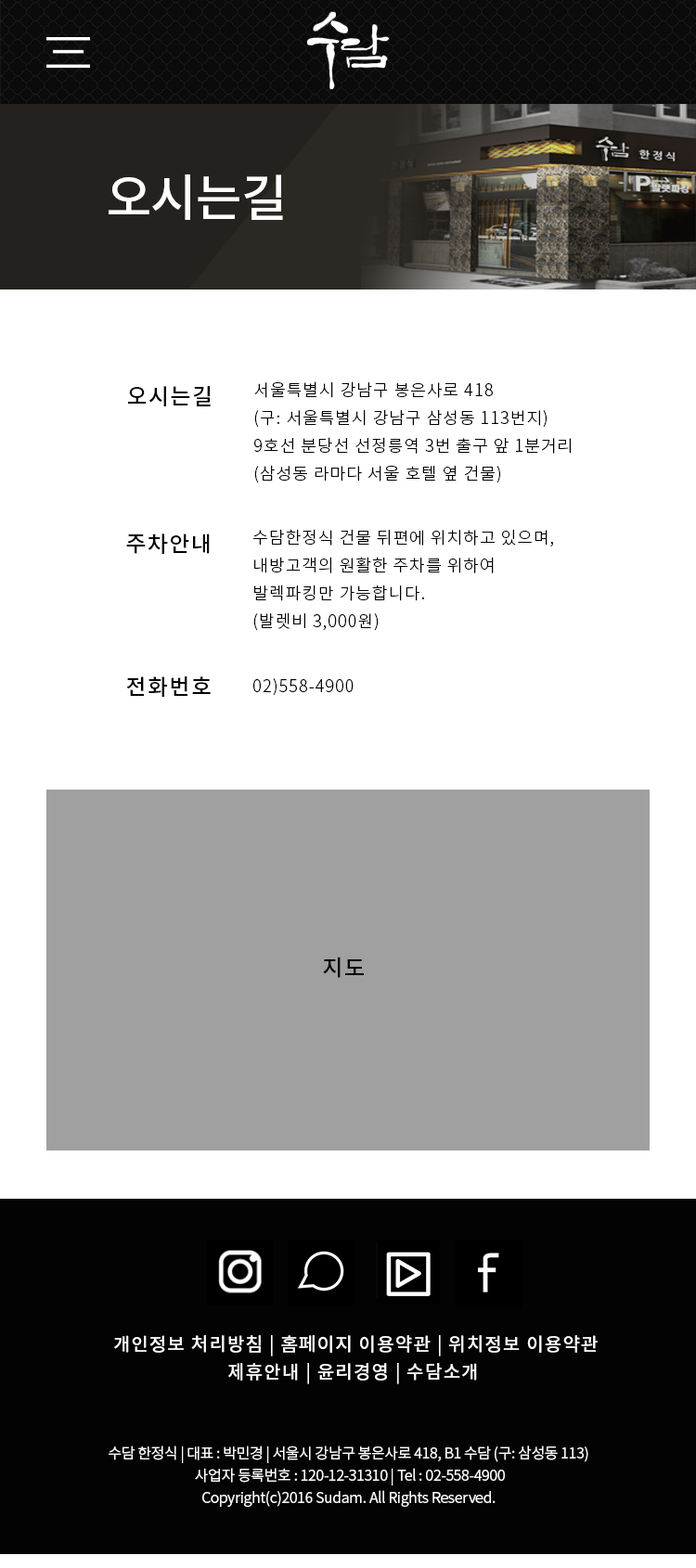
<style>
.page{position:relative;width:696px;height:1568px;background:#ffffff}
.page>*{position:absolute;margin:0}
.t1{font:22.3px "NotoSansCJKkr-Medium";letter-spacing:0.06em;color:#000000}
.t2{font:16.7px/27.8px "NotoSansCJKkr-Light";letter-spacing:0.06em;color:#000000}
.t3{font:16.7px "NotoSansCJKkr-Light";letter-spacing:0.06em;color:#000000}
.t4{font:18.6px/27.8px "NotoSansCJKkr-Medium";letter-spacing:0.06em;color:#ffffff}
.t5{font:14.8px/22.3px "NotoSansCJKkr-DemiLight";letter-spacing:-0.025em;color:#ffffff}
</style>
<div class="page">
<p class="t1" style="left:128px;top:386px;width:83px;height:20px">오시는길</p>
<p class="t2" style="left:254px;top:381px;width:317px;height:102px">서울특별시 강남구 봉은사로 418<br>(구: 서울특별시 강남구 삼성동 113번지)<br>9호선 분당선 선정릉역 3번 출구 앞 1분거리<br>(삼성동 라마다 서울 호텔 옆 건물)</p>
<p class="t1" style="left:126px;top:533px;width:84px;height:21px">주차안내</p>
<p class="t2" style="left:253px;top:529px;width:300px;height:102px">수담한정식 건물 뒤편에 위치하고 있으며,<br>내방고객의 원활한 주차를 위하여<br>발렉파킹만 가능합니다.<br>(발렛비 3,000원)</p>
<p class="t1" style="left:126px;top:676px;width:85px;height:21px">전화번호</p>
<p class="t3" style="left:253px;top:678px;width:100px;height:18px">02)558-4900</p>
<p class="t1" style="left:323px;top:957px;width:41px;height:21px">지도</p>
<p class="t4" style="left:114px;top:1335px;width:484px;height:49px;text-align:center">개인정보 처리방침 | 홈페이지 이용약관 | 위치정보 이용약관<br>제휴안내 | 윤리경영 | 수담소개</p>
<p class="t5" style="left:109px;top:1446px;width:479px;height:61px;text-align:center">수담 한정식 | 대표 : 박민경 | 서울시 강남구 봉은사로 418, B1 수담 (구: 삼성동 113) <br>사업자 등록번호 : 120-12-31310 | Tel : 02-558-4900<br>Copyright(c)2016 Sudam. All Rights Reserved.</p>
</div>
